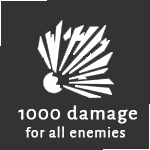
<style>
.page{position:relative;width:150px;height:150px;background:#333333}
.page>*{position:absolute;margin:0}
.t1{font:20px "AlegreyaSans-Regular";letter-spacing:0.05em;color:#fefefe;font-weight:bold}
.t2{font:15px "AlegreyaSans-Regular";letter-spacing:0.05em;color:#fefefe;font-weight:bold}
</style>
<div class="page">
<p class="t1" style="left:18px;top:105px;width:120px;height:19px">1000 damage</p>
<p class="t2" style="left:25px;top:126px;width:100px;height:12px">for all enemies</p>
</div>
